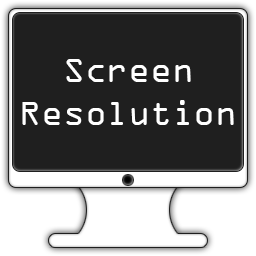
<style>
.page{position:relative;width:256px;height:256px;background:#1f1f1f}
.page>*{position:absolute;margin:0}
.t1{font:36px "OCRAExtended";color:#ffffff}
</style>
<div class="page">
<p class="t1" style="left:22px;top:59px;width:212px;height:66px;text-align:center">Screen<br>Resolution</p>
</div>
